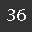
<style>
.page{position:relative;width:32px;height:32px;background:#333333}
.page>*{position:absolute;margin:0}
.t1{font:17.8px "MyriadPro-Regular";color:#ffffff;scale:1.12 1}
</style>
<div class="page">
<p class="t1" style="left:7px;top:9px;width:19px;height:12px">36</p>
</div>
